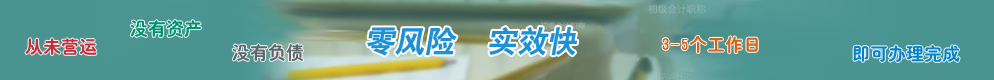
<style>
.page{position:relative;width:994px;height:80px;background:#499490}
.page>*{position:absolute;margin:0}
.t1{font:18px "ç»å¸ç²åç®-regular";color:#00926c}
.t2{font:30px "ç»å¸ç²é»ç®-regular";color:#1e90d6;font-style:italic}
.t3{font:18px "ç»å¸ç²åç®-regular";color:#c22e3a}
.t4{font:18px "ç»å¸ç²åç®-regular";color:#d96314}
.t5{font:18px "ç»å¸ç²åç®-regular";color:#5f666c}
.t6{font:18px "ç»å¸ç²åç®-regular";color:#0282c9}
</style>
<div class="page">
<p class="t1" style="left:130px;top:20px;width:71px;height:18px">没有资产</p>
<p class="t2" style="left:367px;top:27px;width:90px;height:29px">零风险</p>
<p class="t2" style="left:489px;top:27px;width:89px;height:29px">实效快</p>
<p class="t3" style="left:25px;top:38px;width:72px;height:17px">从未营运</p>
<p class="t4" style="left:662px;top:35px;width:96px;height:19px">3-5个工作日</p>
<p class="t5" style="left:232px;top:44px;width:72px;height:18px">没有负债</p>
<p class="t6" style="left:853px;top:45px;width:107px;height:17px">即可办理完成</p>
</div>
